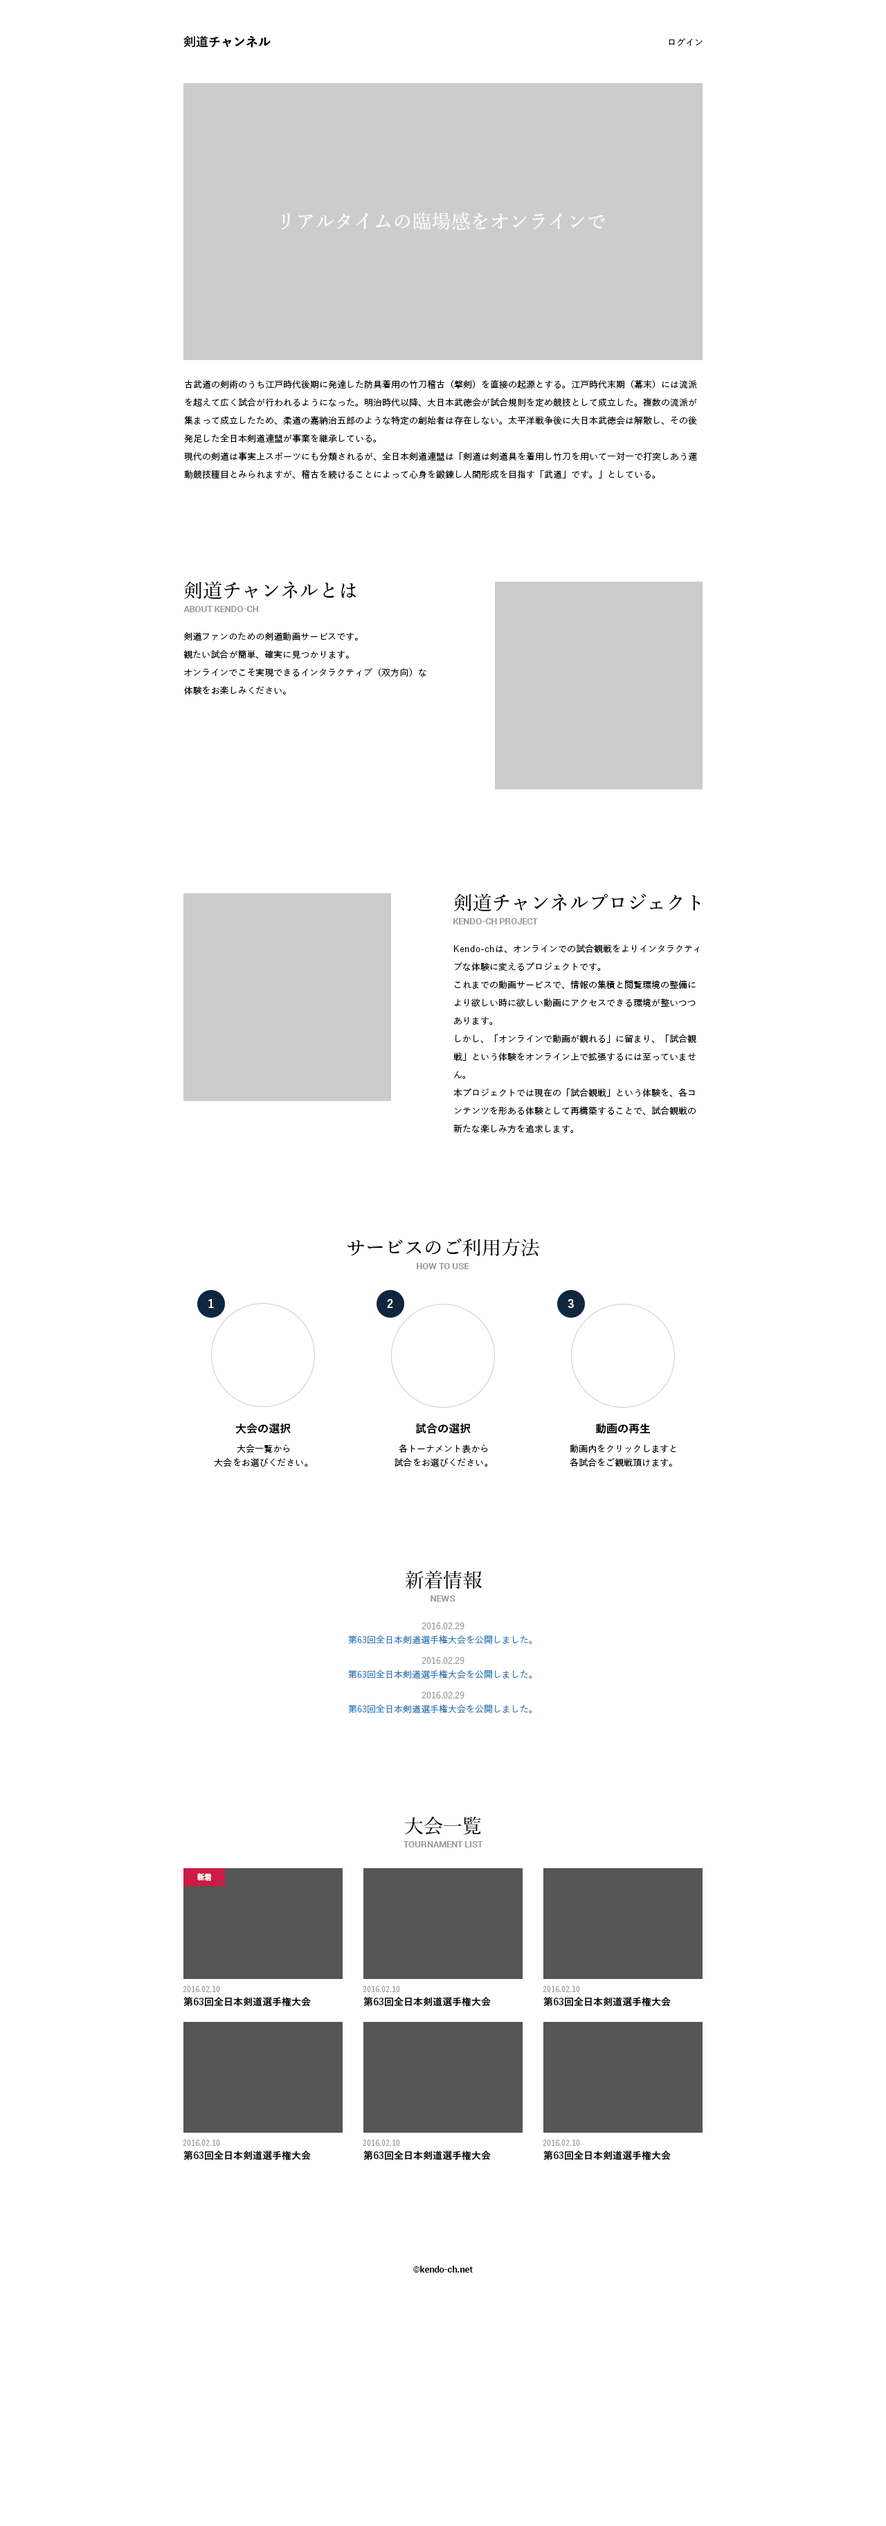
<style>
.page{position:relative;width:886px;height:2526px;background:#ffffff}
.page>*{position:absolute;margin:0}
.t1{font:12.5px "YuGo-Bold";color:#000000}
.t2{font:9px "YuGo-Medium";color:#000000}
.t3{font:19.4px "YuMin-Medium";color:#ffffff}
.t4{font:9px/18px "YuGo-Medium";color:#000000}
.t5{font:19.4px "YuMin-Medium";color:#000000}
.t6{font:9px "Roboto-Bold";color:#999999}
.t7{font:11.1px "YuGo-Bold";letter-spacing:0.05em;color:#ffffff}
.t8{font:11.1px "YuGo-Bold";color:#000000}
.t9{font:9px/13.8px "YuGo-Medium";color:#000000}
.t10{font:9px/13.8px "YuGo-Medium";color:#337ab7}
.t11{font:9px/13.8px "YuGo-Medium";color:#999999}
.t12{font:7.6px "YuGo-Bold";color:#ffffff}
.t13{font:7.6px "YuGo-Medium";color:#999999}
.t14{font:9.7px "YuGo-Bold";color:#000000}
.t15{font:9px "Roboto-Bold";color:#000000}
</style>
<div class="page">
<p class="t1" style="left:183px;top:35px;width:88px;height:13px">剣道チャンネル</p>
<p class="t2" style="left:669px;top:38px;width:34px;height:8px">ログイン</p>
<p class="t3" style="left:281px;top:212px;width:324px;height:18px">リアルタイムの臨場感をオンラインで</p>
<p class="t4" style="left:184px;top:379px;width:514px;height:100px">古武道の剣術のうち江戸時代後期に発達した防具着用の竹刀稽古（撃剣）を直接の起源とする。江戸時代末期（幕末）には流派を超えて広く試合が行われるようになった。明治時代以降、大日本武徳会が試合規則を定め競技として成立した。複数の流派が集まって成立したため、柔道の嘉納治五郎のような特定の創始者は存在しない。太平洋戦争後に大日本武徳会は解散し、その後発足した全日本剣道連盟が事業を継承している。<br>現代の剣道は事実上スポーツにも分類されるが、全日本剣道連盟は「剣道は剣道具を着用し竹刀を用いて一対一で打突しあう運動競技種目とみられますが、稽古を続けることによって心身を鍛錬し人間形成を目指す「武道」です。」としている。</p>
<p class="t5" style="left:184px;top:581px;width:172px;height:19px">剣道チャンネルとは</p>
<p class="t6" style="left:183px;top:606px;width:75px;height:6px">ABOUT KENDO-CH</p>
<p class="t4" style="left:183px;top:632px;width:243px;height:62px">剣道ファンのための剣道動画サービスです。<br>観たい試合が簡単、確実に見つかります。<br>オンラインでこそ実現できるインタラクティブ（双方向）な体験をお楽しみください。</p>
<p class="t5" style="left:454px;top:893px;width:247px;height:19px">剣道チャンネルプロジェクト</p>
<p class="t6" style="left:453px;top:918px;width:85px;height:6px">KENDO-CH PROJECT</p>
<p class="t4" style="left:453px;top:944px;width:246px;height:189px">Kendo-chは、オンラインでの試合観戦をよりインタラクティブな体験に変えるプロジェクトです。<br>これまでの動画サービスで、情報の集積と閲覧環境の整備により欲しい時に欲しい動画にアクセスできる環境が整いつつあります。<br>しかし、「オンラインで動画が観れる」に留まり、「試合観戦」という体験をオンライン上で拡張するには至っていません。<br>本プロジェクトでは現在の「試合観戦」という体験を、各コンテンツを形ある体験として再構築することで、試合観戦の新たな楽しみ方を追求します。</p>
<p class="t5" style="left:348px;top:1238px;width:191px;height:19px">サービスのご利用方法</p>
<p class="t6" style="left:417px;top:1263px;width:52px;height:6px">HOW TO USE</p>
<p class="t7" style="left:208px;top:1299px;width:6px;height:9px">1</p>
<p class="t7" style="left:387px;top:1299px;width:6px;height:9px">2</p>
<p class="t7" style="left:568px;top:1299px;width:6px;height:9px">3</p>
<p class="t8" style="left:235px;top:1423px;width:56px;height:11px">大会の選択</p>
<p class="t8" style="left:415px;top:1423px;width:56px;height:11px">試合の選択</p>
<p class="t8" style="left:595px;top:1423px;width:55px;height:11px">動画の再生</p>
<p class="t9" style="left:214px;top:1443px;width:94px;height:23px;text-align:center">大会一覧から<br>大会をお選びください。</p>
<p class="t9" style="left:395px;top:1443px;width:93px;height:23px;text-align:center">各トーナメント表から<br>試合をお選びください。</p>
<p class="t9" style="left:570px;top:1444px;width:106px;height:22px;text-align:center">動画内をクリックしますと<br>各試合をご観戦頂けます。</p>
<p class="t5" style="left:405px;top:1570px;width:77px;height:19px">新着情報</p>
<p class="t6" style="left:431px;top:1595px;width:25px;height:6px">NEWS</p>
<p class="t10" style="left:348px;top:1622px;width:184px;height:22px;text-align:center"><span class="t11">2016.02.29<br></span>第63回全日本剣道選手権大会を公開しました。</p>
<p class="t10" style="left:348px;top:1657px;width:184px;height:21px;text-align:center"><span class="t11">2016.02.29<br></span>第63回全日本剣道選手権大会を公開しました。</p>
<p class="t10" style="left:348px;top:1691px;width:184px;height:22px;text-align:center"><span class="t11">2016.02.29<br></span>第63回全日本剣道選手権大会を公開しました。</p>
<p class="t5" style="left:405px;top:1816px;width:76px;height:19px">大会一覧</p>
<p class="t6" style="left:404px;top:1841px;width:79px;height:6px">TOURNAMENT LIST</p>
<p class="t12" style="left:197px;top:1873px;width:15px;height:8px">新着</p>
<p class="t13" style="left:183px;top:1986px;width:37px;height:6px">2016.02.10</p>
<p class="t13" style="left:363px;top:1986px;width:37px;height:6px">2016.02.10</p>
<p class="t13" style="left:543px;top:1986px;width:37px;height:6px">2016.02.10</p>
<p class="t14" style="left:183px;top:1997px;width:128px;height:9px">第63回全日本剣道選手権大会</p>
<p class="t14" style="left:363px;top:1997px;width:128px;height:9px">第63回全日本剣道選手権大会</p>
<p class="t14" style="left:543px;top:1997px;width:128px;height:9px">第63回全日本剣道選手権大会</p>
<p class="t13" style="left:183px;top:2139px;width:37px;height:6px">2016.02.10</p>
<p class="t13" style="left:363px;top:2139px;width:37px;height:6px">2016.02.10</p>
<p class="t13" style="left:543px;top:2139px;width:37px;height:6px">2016.02.10</p>
<p class="t14" style="left:183px;top:2150px;width:128px;height:10px">第63回全日本剣道選手権大会</p>
<p class="t14" style="left:363px;top:2150px;width:128px;height:10px">第63回全日本剣道選手権大会</p>
<p class="t14" style="left:543px;top:2150px;width:128px;height:10px">第63回全日本剣道選手権大会</p>
<p class="t15" style="left:413px;top:2265px;width:60px;height:7px">©kendo-ch.net</p>
</div>
